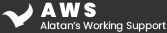
<style>
.page{position:relative;width:167px;height:33px;background:#333333}
.page>*{position:absolute;margin:0}
.t1{font:20px "Poppins-Black";color:#ffffff}
.t2{font:10px "Poppins-Regular";color:#ffffff}
</style>
<div class="page">
<p class="t1" style="left:40px;top:2px;width:56px;height:16px">A W S</p>
<p class="t2" style="left:40px;top:21px;width:126px;height:11px">Alatan’s Working Support</p>
</div>
